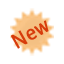
<style>
.page{position:relative;width:64px;height:64px;background:#ffffff}
.page>*{position:absolute;margin:0}
.t1{font:20.4px "SegoeCondensed";color:#d73c0c;font-weight:bold;scale:1.18 1}
</style>
<div class="page">
<p class="t1" style="left:11px;top:20px;width:38px;height:29px;rotate:-30deg">New</p>
</div>
